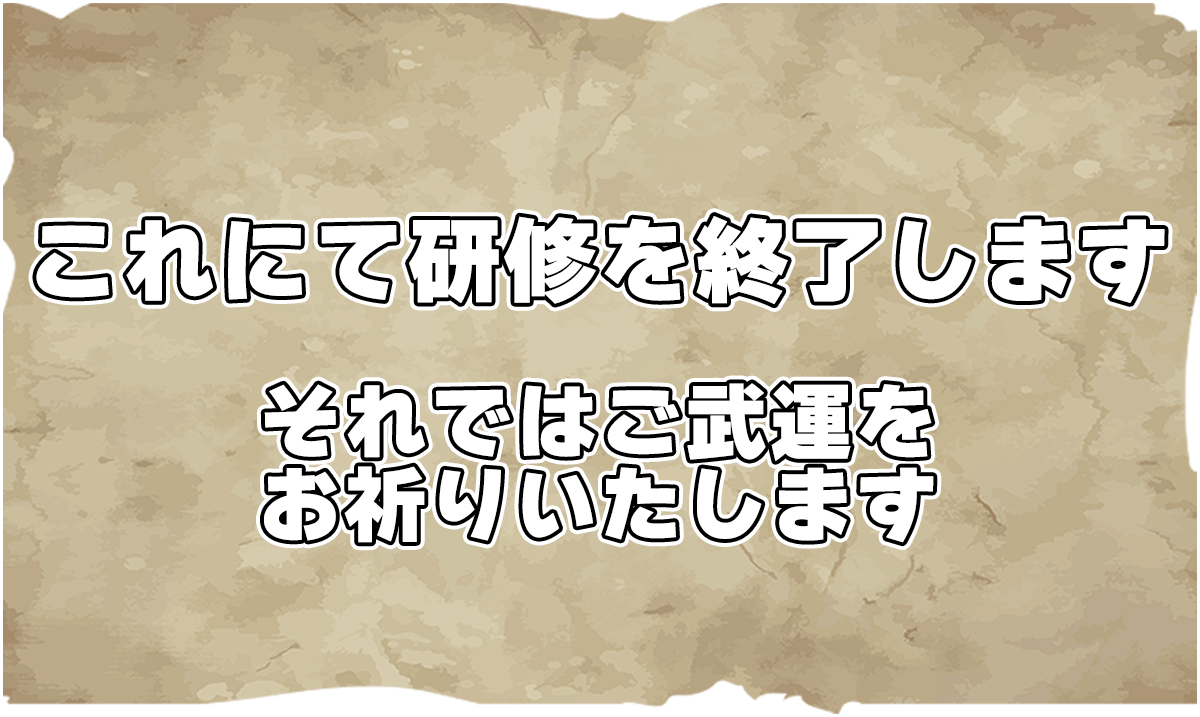
<style>
.page{position:relative;width:1200px;height:717px}
.page>*{position:absolute;margin:0}
.t1{font:83px/83px "WanpakuRuika-08";color:#ffffff;font-weight:bold}
.t2{font:92.9px/83px "WanpakuRuika-08";color:#ffffff;font-weight:bold}
</style>
<div class="page">
<p class="t1" style="left:36px;top:216px;width:1129px;height:327px;text-align:center"><span class="t2">これにて研修を終了します<br></span><br>それではご武運を<br>お祈りいたします</p>
</div>
